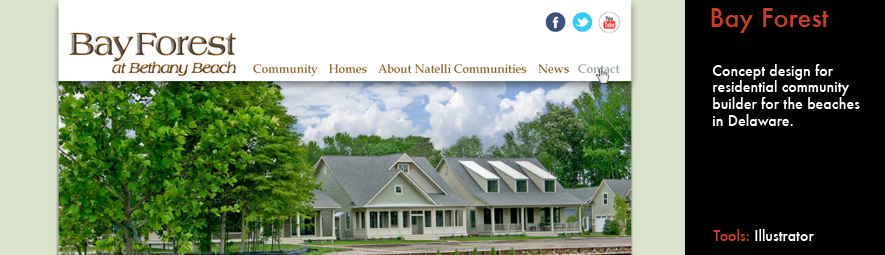
<style>
.page{position:relative;width:885px;height:255px;background:#000000}
.page>*{position:absolute;margin:0}
.t1{font:25px "Futura-Medium";color:#c63e28}
.t2{font:14px "Futura-Medium";color:#ffffff}
.t3{font:14px "Futura-Medium";color:#c63e28}
</style>
<div class="page">
<p class="t1" style="left:711px;top:8px;width:118px;height:25px">Bay Forest</p>
<p class="t2" style="left:712px;top:64px;width:148px;height:62px">Concept design for<br>residential community<br>builder for the beaches in Delaware.</p>
<p class="t2" style="left:713px;top:229px;width:101px;height:12px"><span class="t3">Tools: </span>Illustrator</p>
</div>
